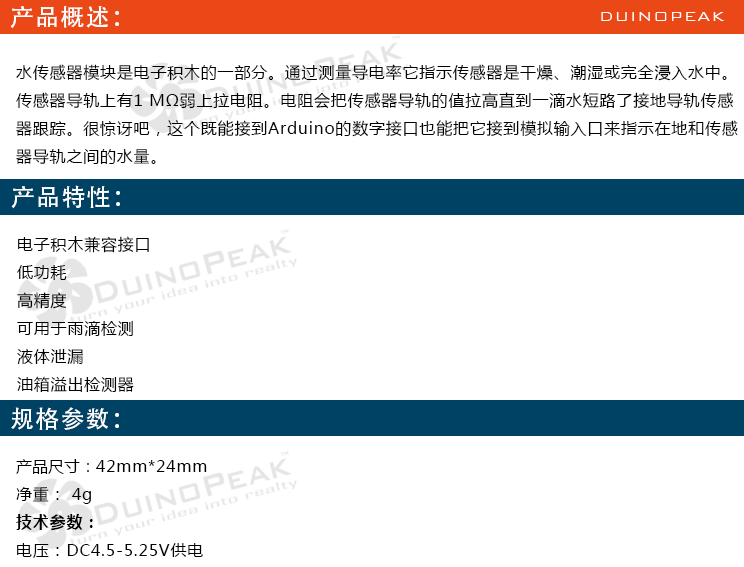
<style>
.page{position:relative;width:744px;height:567px;background:#ffffff}
.page>*{position:absolute;margin:0}
.t1{font:24px "AdobeHeitiStd-Regular";letter-spacing:0.05em;color:#ffffff}
.t2{font:18px "BankGothicBT-Light";letter-spacing:0.05em;color:#ffffff}
.t3{font:16px "MicrosoftYaHei";letter-spacing:0.05em;color:#000000}
.t4{font:16px "MicrosoftYaHei";color:#000000}
.t5{font:16px "MicrosoftYaHei-Bold";letter-spacing:0.05em;color:#000000}
</style>
<div class="page">
<p class="t1" style="left:10px;top:6px;width:109px;height:23px">产品概述：</p>
<p class="t2" style="left:601px;top:12px;width:124px;height:9px">DUINOPEAK</p>
<p class="t3" style="left:16px;top:64px;width:722px;height:100px">水传感器模块是电子积木的一部分。通过测量导电率它指示传感器是干燥、潮湿或完全浸入水中。<br>传感器导轨上有1 MΩ弱上拉电阻。电阻会把传感器导轨的值拉高直到一滴水短路了接地导轨传感<br>器跟踪。很惊讶吧，这个既能接到Arduino的数字接口也能把它接到模拟输入口来指示在地和传感<br>器导轨之间的水量。</p>
<p class="t1" style="left:11px;top:185px;width:109px;height:24px">产品特性：</p>
<p class="t3" style="left:17px;top:236px;width:132px;height:157px">电子积木兼容接口<br>低功耗<br>高精度<br>可用于雨滴检测<br>液体泄漏<br>油箱溢出检测器</p>
<p class="t1" style="left:11px;top:407px;width:108px;height:23px">规格参数：</p>
<p class="t3" style="left:16px;top:459px;width:191px;height:99px"><span class="t4">产品尺寸：</span>42mm*24mm<br>净重： 4g<br><span class="t5">技术参数：<br></span>电压：DC4.5-5.25V供电</p>
</div>
